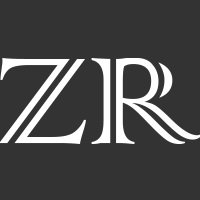
<style>
.page{position:relative;width:200px;height:200px;background:#333333}
.page>*{position:absolute;margin:0}
.t1{font:164.2px "ColonnaMT";color:#ffffff}
</style>
<div class="page">
<p class="t1" style="left:0px;top:58px;width:202px;height:86px">ZR</p>
</div>
